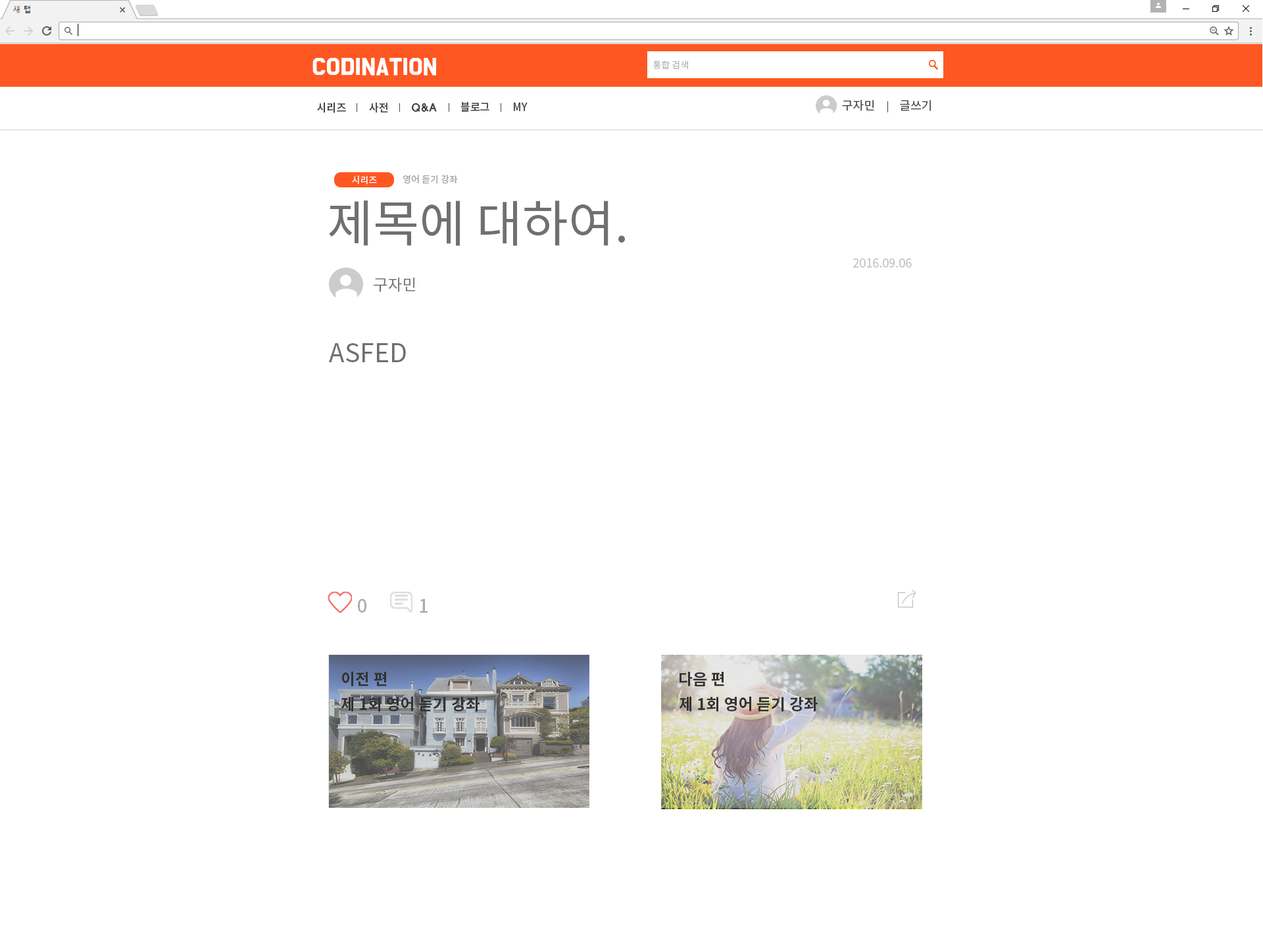
<style>
.page{position:relative;width:1263px;height:944px;background:#ffffff}
.page>*{position:absolute;margin:0}
.t1{font:19.7px "BMDoHyeon";color:#ffffff;font-weight:bold}
.t2{font:9.2px "NotoSansCJKkr-DemiLight";color:#b5b5b5}
.t3{font:10.9px "NotoSansCJKkr-Medium";letter-spacing:-0.01em;color:#424242}
.t4{font:11.8px "NotoSansCJKkr-Regular";color:#424242}
.t5{font:10.9px "HYwulB";letter-spacing:-0.025em;color:#424242}
.t6{font:9.2px "NotoSansCJKkr-Regular";color:#ffffff}
.t7{font:9.2px "NotoSansCJKkr-Regular";color:#9e9e9e}
.t8{font:50px "NotoSansCJKkr-Regular";color:#707070}
.t9{font:11.8px "NotoSansCJKkr-Regular";color:#c2c2c2}
.t10{font:15.7px "NotoSansCJKkr-Regular";color:#707070}
.t11{font:25.6px "NotoSansCJKkr-Regular";color:#707070}
.t12{font:18px "NotoSansCJKkr-Medium";color:#acacac}
.t13{font:15.8px "NotoSansCJKkr-Bold";color:#323232}
</style>
<div class="page">
<p class="t1" style="left:312px;top:58px;width:124px;height:18px">CODINATION</p>
<p class="t2" style="left:653px;top:61px;width:35px;height:9px">통합 검색</p>
<p class="t3" style="left:460px;top:102px;width:29px;height:10px">블로그</p>
<p class="t4" style="left:842px;top:100px;width:32px;height:11px">구자민</p>
<p class="t4" style="left:900px;top:100px;width:31px;height:11px">글쓰기</p>
<p class="t3" style="left:317px;top:103px;width:29px;height:10px">시리즈</p>
<p class="t3" style="left:369px;top:103px;width:19px;height:10px">사전</p>
<p class="t5" style="left:411px;top:103px;width:26px;height:9px">Q&amp;A</p>
<p class="t3" style="left:514px;top:103px;width:13px;height:8px">MY</p>
<p class="t6" style="left:352px;top:176px;width:25px;height:9px">시리즈</p>
<p class="t7" style="left:403px;top:175px;width:55px;height:9px">영어 듣기 강좌</p>
<p class="t8" style="left:329px;top:201px;width:296px;height:45px">제목에 대하여.</p>
<p class="t9" style="left:853px;top:258px;width:58px;height:10px">2016.09.06</p>
<p class="t10" style="left:374px;top:278px;width:41px;height:14px">구자민</p>
<p class="t11" style="left:329px;top:343px;width:77px;height:19px">ASFED</p>
<p class="t12" style="left:358px;top:599px;width:8px;height:14px">0</p>
<p class="t12" style="left:420px;top:599px;width:7px;height:14px">1</p>
<p class="t13" style="left:342px;top:671px;width:45px;height:16px">이전 편</p>
<p class="t13" style="left:679px;top:672px;width:45px;height:15px">다음 편</p>
<p class="t13" style="left:341px;top:696px;width:138px;height:16px">제 1회 영어 듣기 강좌</p>
<p class="t13" style="left:679px;top:696px;width:138px;height:16px">제 1회 영어 듣기 강좌</p>
</div>
